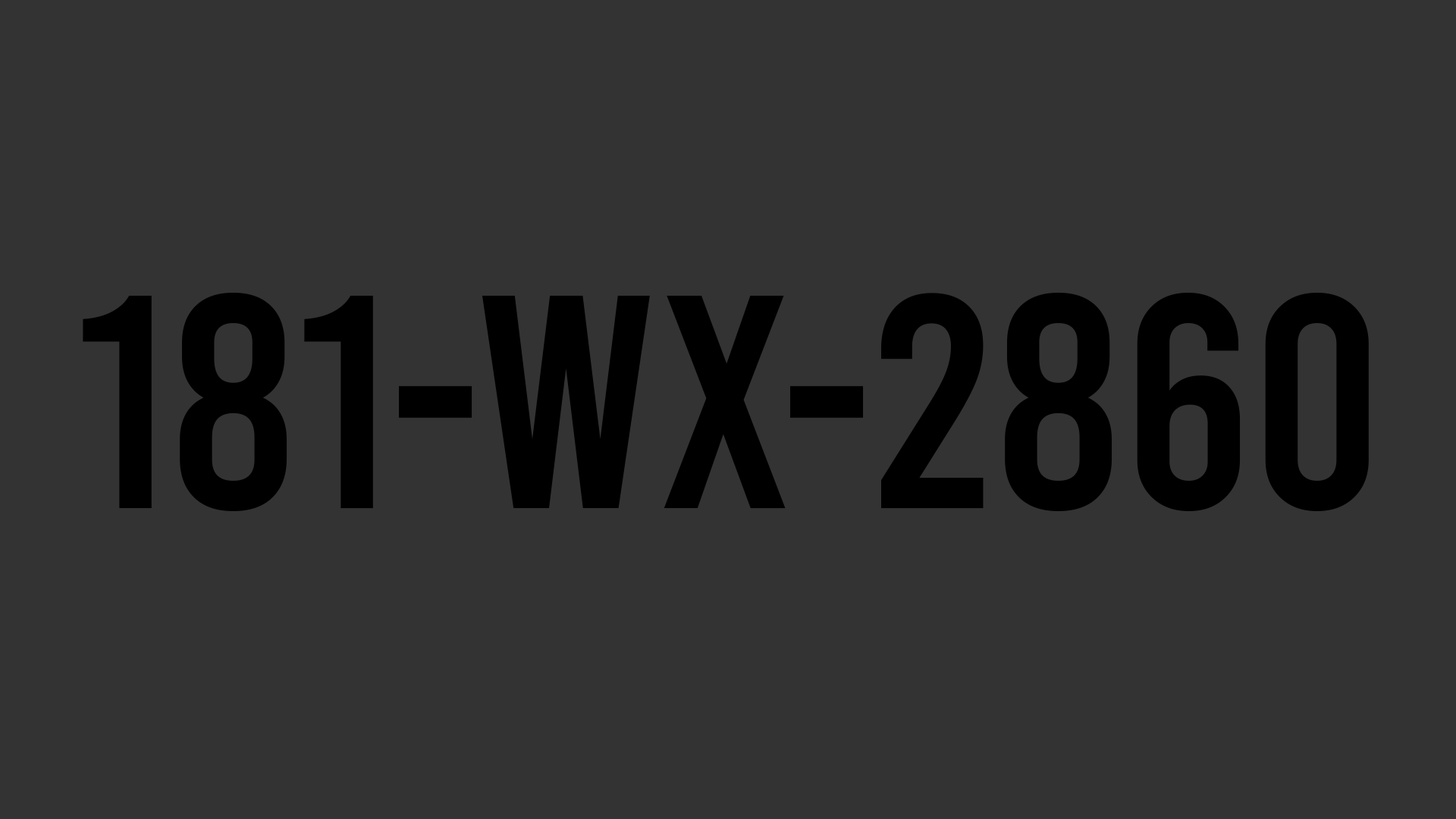
<style>
.page{position:relative;width:1456px;height:819px;background:#333333}
.page>*{position:absolute;margin:0}
.t1{font:303.3px "Bebas-Regular";color:#000000}
</style>
<div class="page">
<p class="t1" style="left:83px;top:292px;width:1286px;height:219px">181-WX-2860</p>
</div>
